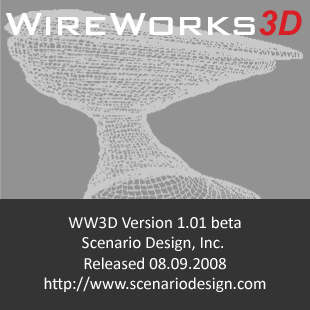
<style>
.page{position:relative;width:310px;height:310px;background:#929292}
.page>*{position:absolute;margin:0}
.t1{font:42.5px "BankGothicBT-Medium";color:#fefefe}
.t2{font:34px "Arial-BoldItalicMT";color:#da1e25}
.t3{font:17px "Calibri";color:#ffffff}
</style>
<div class="page">
<p class="t1" style="left:5px;top:10px;width:297px;height:26px">WireWorks<span class="t2">3D</span></p>
<p class="t3" style="left:44px;top:216px;width:222px;height:76px;text-align:center">WW3D Version 1.01 beta<br>Scenario Design, Inc. <br>Released 08.09.2008<br>http://www.scenariodesign.com</p>
</div>
